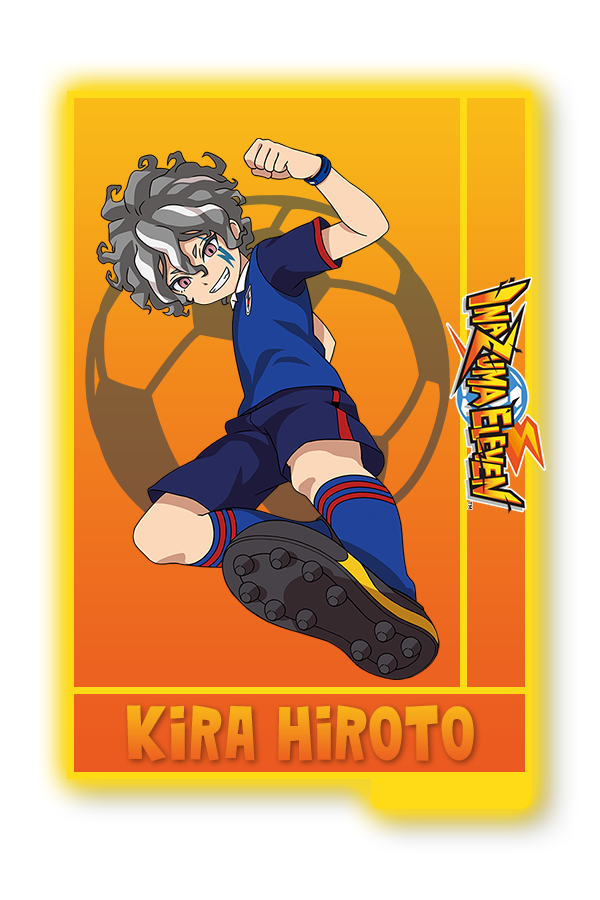
<style>
.page{position:relative;width:600px;height:900px;background:#ffffff}
.page>*{position:absolute;margin:0}
.t1{font:79.9px "TTG-Bold"}
</style>
<div class="page">
<p class="t1" style="left:127px;top:705px;width:347px;height:57px">Kira Hiroto</p>
</div>
